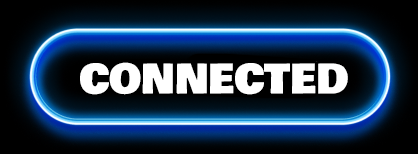
<style>
.page{position:relative;width:418px;height:154px}
.page>*{position:absolute;margin:0}
.t1{font:40px "BowlbyOne-Regular";color:#ffffff}
</style>
<div class="page">
<p class="t1" style="left:80px;top:62px;width:268px;height:33px">CONNECTED</p>
</div>
